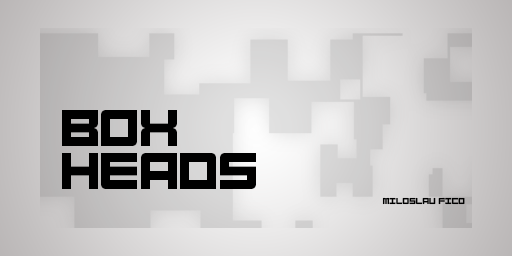
<style>
.page{position:relative;width:512px;height:256px}
.page>*{position:absolute;margin:0}
.t1{font:36px "Bump-IT-UP";color:#000000}
.t2{font:6px "Bump-IT-UP";color:#000000}
</style>
<div class="page">
<p class="t1" style="left:62px;top:110px;width:115px;height:36px">BOX</p>
<p class="t1" style="left:62px;top:153px;width:194px;height:36px">HEADS</p>
<p class="t2" style="left:382px;top:197px;width:83px;height:8px">MILOSLAV FICO</p>
</div>
